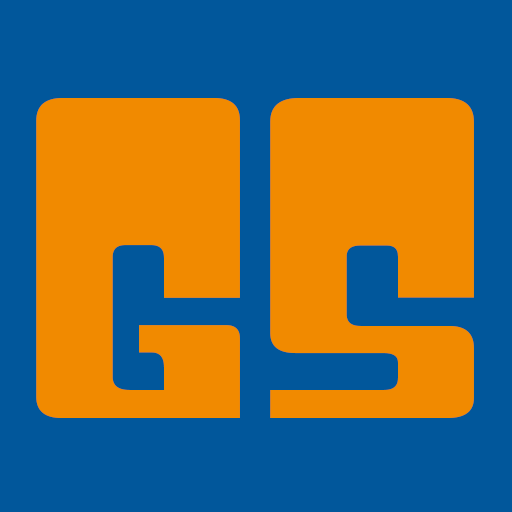
<style>
.page{position:relative;width:512px;height:512px;background:#01579b}
.page>*{position:absolute;margin:0}
.t1{font:412.6px "Gyparody";color:#f18a00;scale:1.23 1}
</style>
<div class="page">
<p class="t1" style="left:36px;top:98px;width:438px;height:320px">GS</p>
</div>
